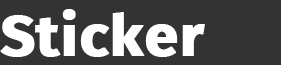
<style>
.page{position:relative;width:281px;height:65px;background:#333333}
.page>*{position:absolute;margin:0}
.t1{font:57px "FiraSans-Bold";color:#ffffff;font-weight:bold;scale:1.05 1}
</style>
<div class="page">
<p class="t1" style="left:0px;top:9px;width:205px;height:48px">Sticker</p>
</div>
